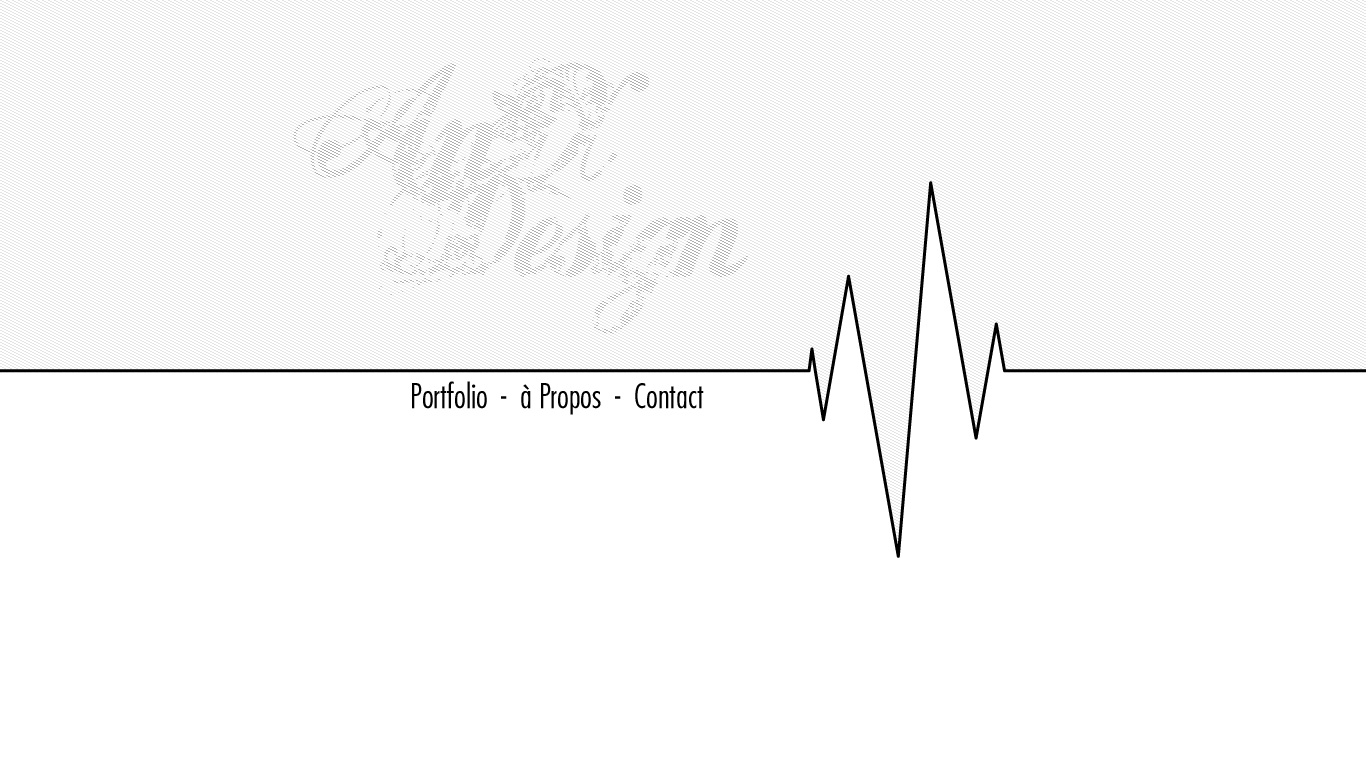
<style>
.page{position:relative;width:1366px;height:768px;background:#ffffff}
.page>*{position:absolute;margin:0}
.t1{font:33px "FuturaLight";color:#000000}
</style>
<div class="page">
<p class="t1" style="left:412px;top:381px;width:292px;height:34px">Portfolio  -  à Propos  -  Contact</p>
</div>
